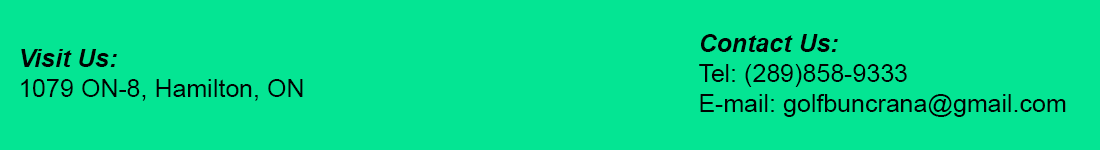
<style>
.page{position:relative;width:1100px;height:150px;background:#04e593}
.page>*{position:absolute;margin:0}
.t1{font:25px "ArialMT";color:#000302}
.t2{font:25px "Arial-BoldItalicMT";color:#000302}
</style>
<div class="page">
<p class="t1" style="left:699px;top:34px;width:367px;height:83px"><span class="t2">Contact Us:<br></span>Tel: (289)858-9333<br>E-mail: golfbuncrana@gmail.com</p>
<p class="t1" style="left:21px;top:49px;width:282px;height:52px"><span class="t2">Visit Us:<br></span>1079 ON-8, Hamilton, ON</p>
</div>
